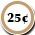
<style>
.page{position:relative;width:35px;height:35px;background:#ffffff}
.page>*{position:absolute;margin:0}
.t1{font:12px "Optima-ExtraBlack";color:#060606}
</style>
<div class="page">
<p class="t1" style="left:7px;top:13px;width:21px;height:11px">25¢</p>
</div>
